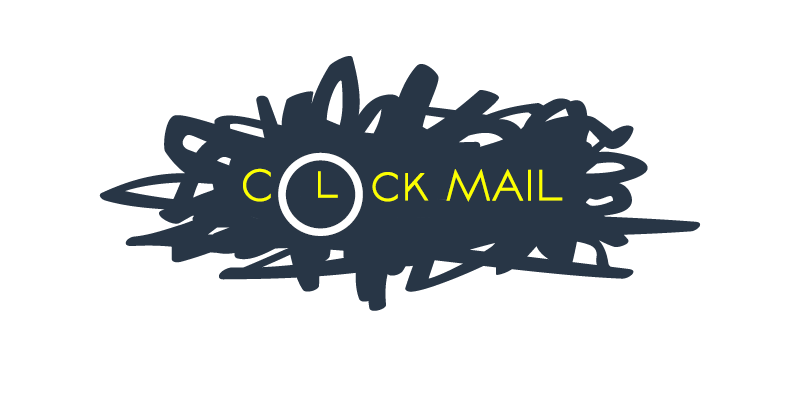
<style>
.page{position:relative;width:800px;height:400px;background:#ffffff}
.page>*{position:absolute;margin:0}
.t1{font:103.4px "AvianoSansLight";color:#ffffff;font-weight:bold;scale:1.32 1}
.t2{font:54px "AvianoSansLight";color:#fcff00;font-weight:bold;scale:0.76 1}
.t3{font:39.5px "AvianoSansLight";color:#fcff00;font-weight:bold;scale:1.32 1}
</style>
<div class="page">
<p class="t1" style="left:278px;top:152px;width:85px;height:84px">O</p>
<p class="t2" style="left:243px;top:168px;width:320px;height:34px">C      ck MAIL</p>
<p class="t3" style="left:318px;top:171px;width:20px;height:27px">l</p>
</div>
